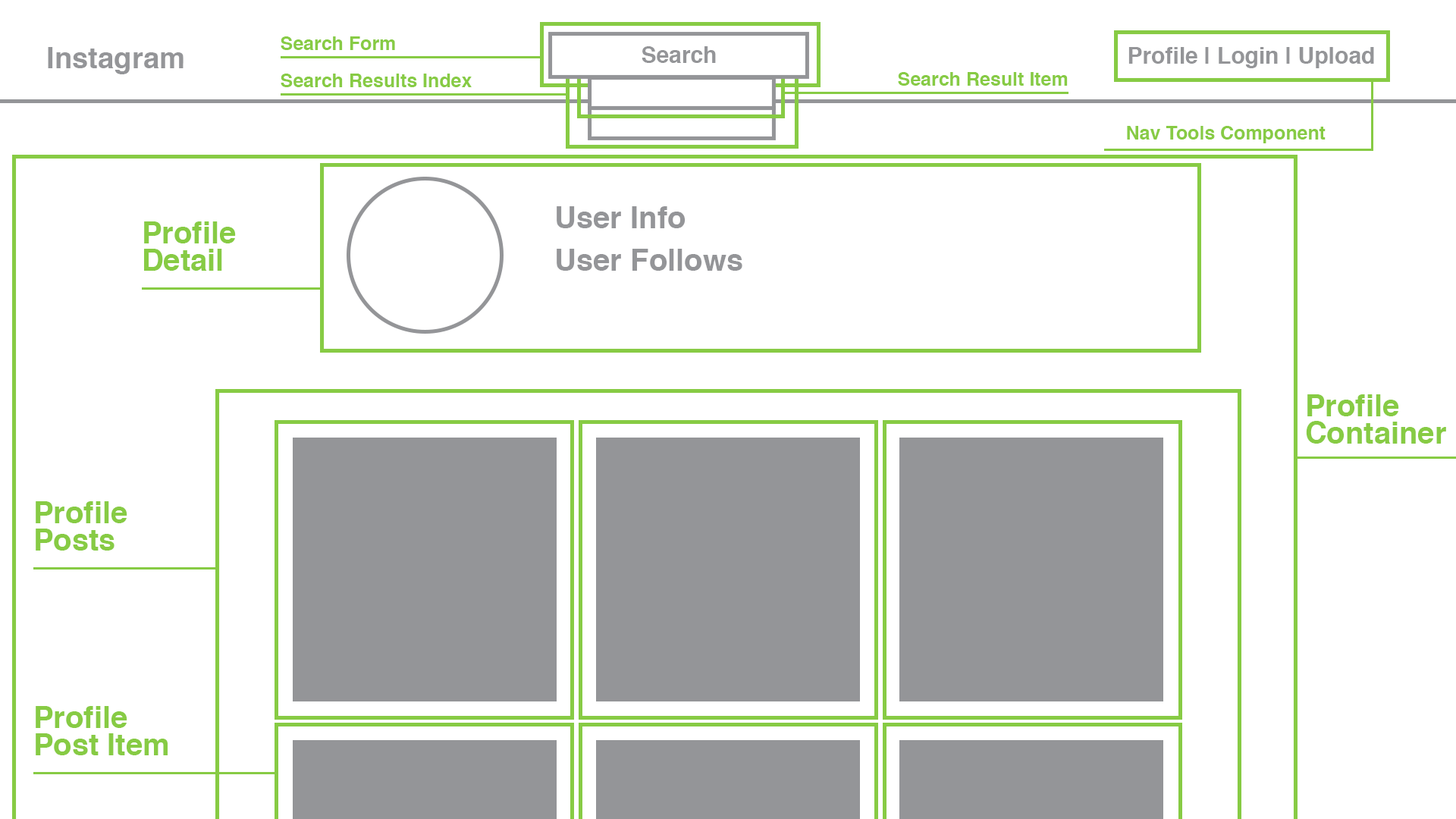
<style>
.page{position:relative;width:1456px;height:819px;background:#ffffff}
.page>*{position:absolute;margin:0}
.t1{font:19px "Helvetica-Bold";color:#87cb44}
.t2{font:29px "Helvetica-Bold";color:#949598}
.t3{font:22.7px "Helvetica-Bold";color:#949598}
.t4{font:30.3px "Helvetica-Bold";color:#949598}
.t5{font:30.3px/26.8px "Helvetica-Bold";color:#87cb44}
</style>
<div class="page">
<p class="t1" style="left:281px;top:36px;width:114px;height:14px">Search Form</p>
<p class="t2" style="left:48px;top:47px;width:136px;height:27px">Instagram</p>
<p class="t3" style="left:642px;top:46px;width:74px;height:17px">Search</p>
<p class="t3" style="left:1128px;top:47px;width:246px;height:21px">Profile | Login | Upload</p>
<p class="t1" style="left:281px;top:74px;width:191px;height:13px">Search Results Index</p>
<p class="t1" style="left:898px;top:72px;width:170px;height:14px">Search Result Item</p>
<p class="t1" style="left:1127px;top:126px;width:199px;height:17px">Nav Tools Component</p>
<p class="t4" style="left:557px;top:206px;width:129px;height:22px">User Info</p>
<p class="t5" style="left:144px;top:221px;width:92px;height:50px">Profile<br>Detail</p>
<p class="t4" style="left:557px;top:249px;width:185px;height:22px">User Follows</p>
<p class="t5" style="left:1306px;top:394px;width:140px;height:50px">Profile<br>Container</p>
<p class="t5" style="left:36px;top:501px;width:91px;height:50px">Profile<br>Posts</p>
<p class="t5" style="left:36px;top:706px;width:132px;height:49px">Profile<br>Post Item</p>
</div>
